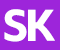
<style>
.page{position:relative;width:60px;height:50px;background:#9d25da}
.page>*{position:absolute;margin:0}
.t1{font:44.1px "AlimamaShuHeiTi-Bold";letter-spacing:-0.075em;color:#ffffff;font-weight:bold}
</style>
<div class="page">
<p class="t1" style="left:4px;top:9px;width:51px;height:33px">SK</p>
</div>
